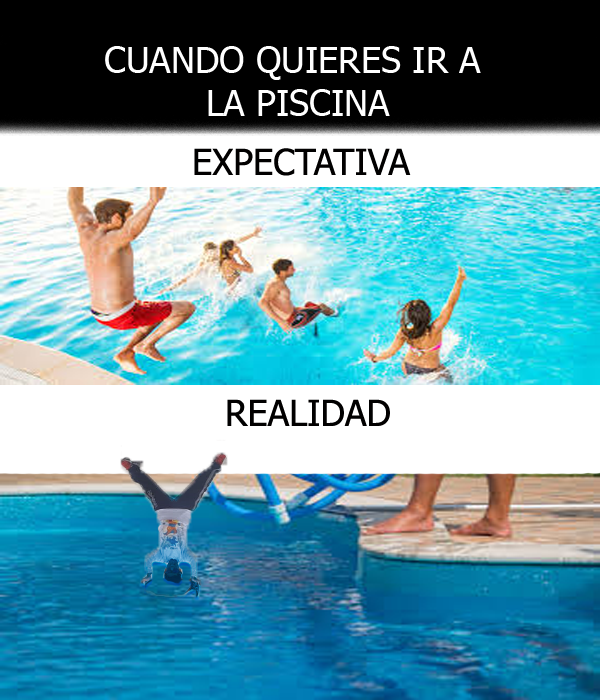
<style>
.page{position:relative;width:600px;height:700px;background:#ffffff}
.page>*{position:absolute;margin:0}
.t1{font:36px "Tahoma";color:#ffffff}
.t2{font:36px "Tahoma";color:#010000}
</style>
<div class="page">
<p class="t1" style="left:105px;top:46px;width:376px;height:70px;text-align:center">CUANDO QUIERES IR A <br>LA PISCINA</p>
<p class="t2" style="left:194px;top:148px;width:217px;height:28px">EXPECTATIVA</p>
<p class="t2" style="left:227px;top:399px;width:163px;height:27px">REALIDAD</p>
</div>
